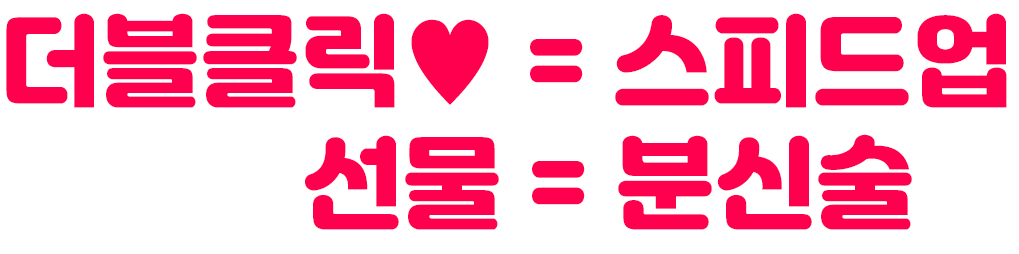
<style>
.page{position:relative;width:1019px;height:254px;background:#ffffff}
.page>*{position:absolute;margin:0}
.t1{font:100px "Jalnan";color:#ff004e}
</style>
<div class="page">
<p class="t1" style="left:6px;top:13px;width:1001px;height:95px">더블클릭♥ = 스피드업</p>
<p class="t1" style="left:305px;top:134px;width:607px;height:96px">선물 = 분신술</p>
</div>
